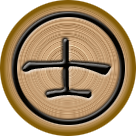
<style>
.page{position:relative;width:136px;height:136px}
.page>*{position:absolute;margin:0}
.t1{font:100px "RS_LiShu_FT"}
</style>
<div class="page">
<p class="t1" style="left:22px;top:38px;width:90px;height:61px">士</p>
</div>
